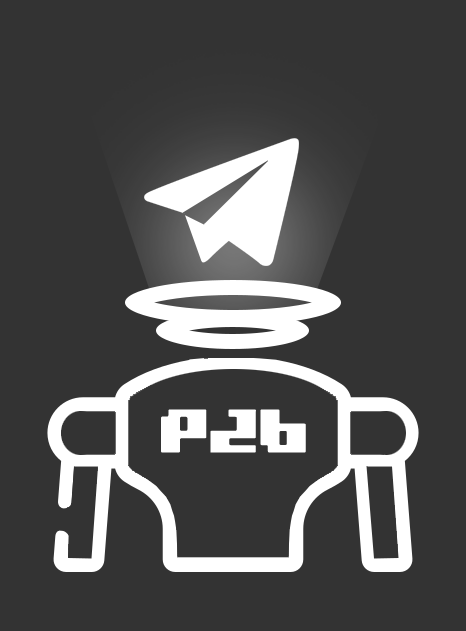
<style>
.page{position:relative;width:466px;height:631px;background:#333333}
.page>*{position:absolute;margin:0}
.t1{font:64px "badrobot";color:#ffffff}
</style>
<div class="page">
<p class="t1" style="left:161px;top:409px;width:145px;height:44px">P2b</p>
</div>
